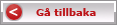
<style>
.page{position:relative;width:117px;height:25px}
.page>*{position:absolute;margin:0}
.t1{font:12px "Verdana-Bold";color:#ffffff}
.t2{font:10px "Verdana-Bold";color:#bd1418}
</style>
<div class="page">
<p class="t1" style="left:9px;top:8px;width:9px;height:8px">&lt;</p>
<p class="t2" style="left:36px;top:8px;width:60px;height:8px">Gå tillbaka</p>
</div>
